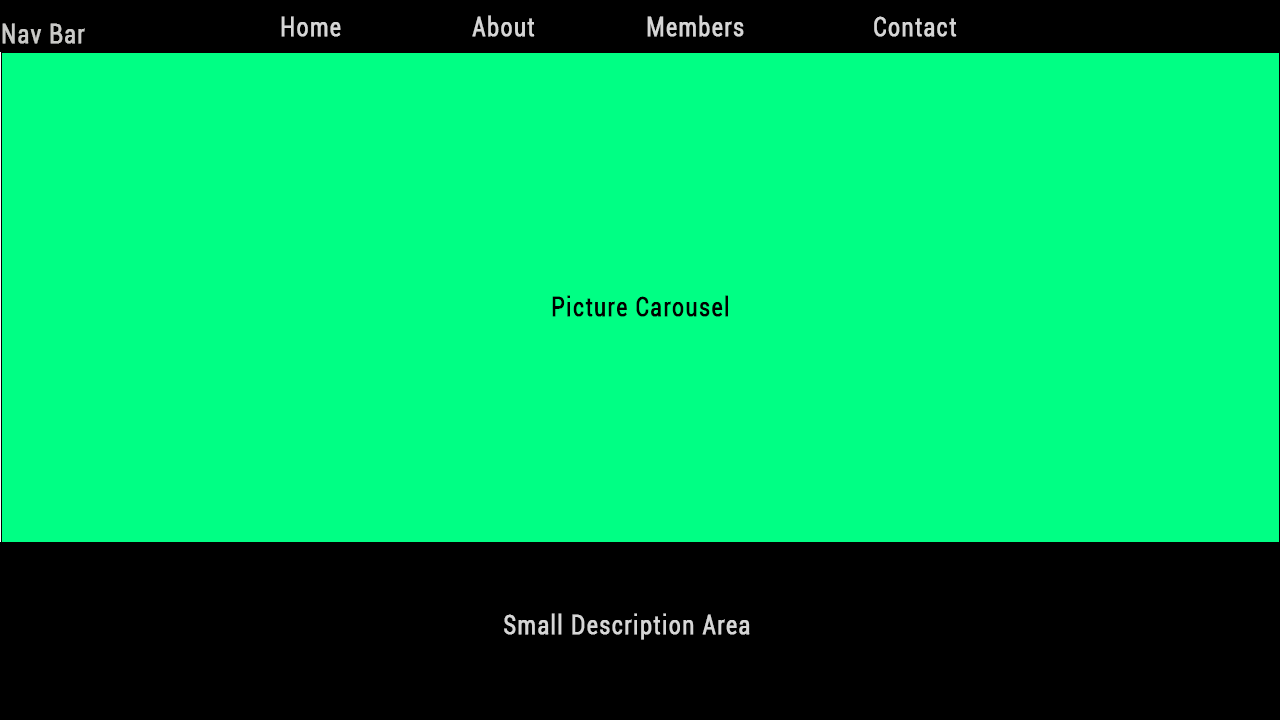
<style>
.page{position:relative;width:1280px;height:720px;background:#00ff84}
.page>*{position:absolute;margin:0}
.t1{font:27.1px "Roboto-Regular";letter-spacing:0.05em;color:#d6d6d6;font-weight:bold;scale:0.77 1}
.t2{font:27.1px "Roboto-Regular";letter-spacing:0.05em;color:#c9c9c7;font-weight:bold;scale:0.77 1}
.t3{font:27.1px "Roboto-Regular";letter-spacing:0.05em;color:#000000;font-weight:bold;scale:0.77 1}
</style>
<div class="page">
<p class="t1" style="left:281px;top:16px;width:60px;height:21px">Home</p>
<p class="t1" style="left:472px;top:15px;width:63px;height:22px">About</p>
<p class="t1" style="left:647px;top:15px;width:97px;height:22px">Members</p>
<p class="t1" style="left:874px;top:16px;width:83px;height:21px">Contact</p>
<p class="t2" style="left:2px;top:23px;width:83px;height:21px">Nav Bar</p>
<p class="t3" style="left:552px;top:295px;width:176px;height:22px">Picture Carousel</p>
<p class="t1" style="left:504px;top:613px;width:246px;height:27px">Small Description Area</p>
</div>
